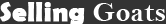
<style>
.page{position:relative;width:166px;height:24px;background:#333333}
.page>*{position:absolute;margin:0}
.t1{font:28.2px "BerlinSansFBDemi-Bold";color:#ffffff;font-weight:bold}
.t2{font:28.2px "BellMTBold";color:#ffffff}
</style>
<div class="page">
<p class="t1" style="left:0px;top:2px;width:165px;height:24px">Selling <span class="t2">Goats</span></p>
</div>
